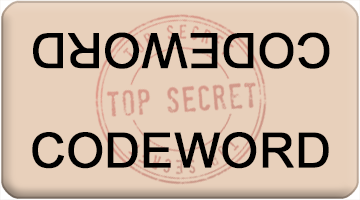
<style>
.page{position:relative;width:360px;height:200px;background:#e8d0bb}
.page>*{position:absolute;margin:0}
.t1{font:48px "ArialMT";color:#000000;font-weight:bold}
</style>
<div class="page">
<p class="t1" style="left:33px;top:32px;width:297px;height:37px;rotate:180deg">CODEWORD</p>
<p class="t1" style="left:32px;top:132px;width:297px;height:37px">CODEWORD</p>
</div>
